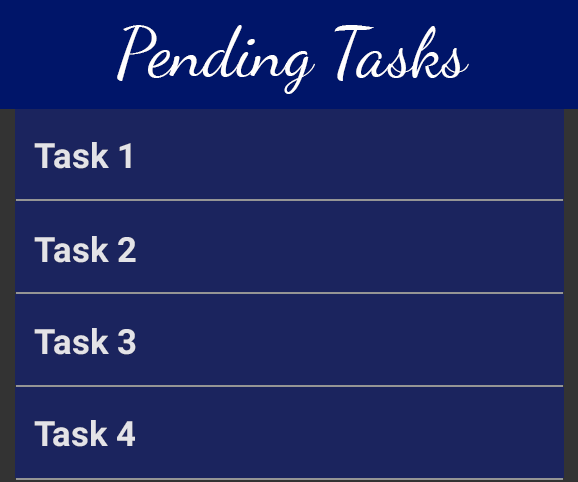
<style>
.page{position:relative;width:578px;height:482px;background:#1b245e}
.page>*{position:absolute;margin:0}
.t1{font:51.8px "DancingScript";color:#fffefe}
.t2{font:34.8px "Roboto-Bold";color:#e3e3e7}
</style>
<div class="page">
<p class="t1" style="left:117px;top:25px;width:352px;height:69px">Pending Tasks</p>
<p class="t2" style="left:34px;top:142px;width:97px;height:27px">Task 1</p>
<p class="t2" style="left:34px;top:236px;width:102px;height:27px">Task 2</p>
<p class="t2" style="left:34px;top:328px;width:102px;height:27px">Task 3</p>
<p class="t2" style="left:34px;top:420px;width:101px;height:27px">Task 4</p>
</div>
